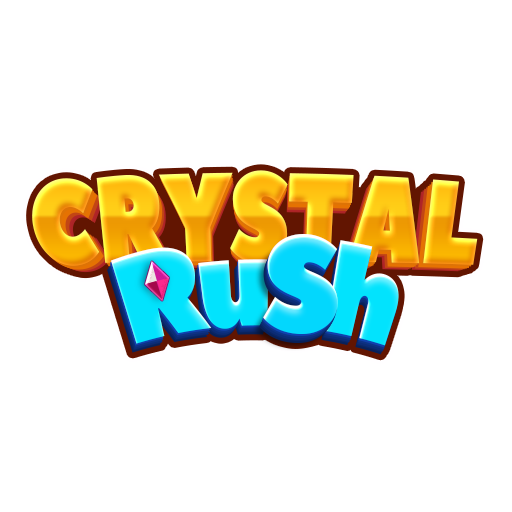
<style>
.page{position:relative;width:512px;height:512px;background:#ffffff}
.page>*{position:absolute;margin:0}
.t1{font:115px "PeaceSans";letter-spacing:-0.025em;scale:0.83 1}
.t2{font:113.9px "PeaceSans";letter-spacing:-0.025em;scale:0.83 1}
.t3{font:112.7px "PeaceSans";letter-spacing:-0.025em;scale:0.83 1}
.t4{font:111.6px "PeaceSans";letter-spacing:-0.025em;scale:0.83 1}
.t5{font:110.5px "PeaceSans";letter-spacing:-0.025em;scale:0.83 1}
.t6{font:109.4px "PeaceSans";letter-spacing:-0.025em;scale:0.83 1}
.t7{font:108.3px "PeaceSans";letter-spacing:-0.025em;scale:0.83 1}
.t8{font:107.2px "PeaceSans";letter-spacing:-0.025em;scale:0.83 1}
.t9{font:137.5px "PeaceSans";color:#03d7fd;scale:0.91 1}
.t10{font:124.6px "PeaceSans";letter-spacing:-0.075em;color:#02e3fd;scale:0.77 1}
</style>
<div class="page">
<p class="t1" style="left:32px;top:170px;width:446px;height:96px">CRYSTAL</p>
<p class="t2" style="left:34px;top:172px;width:441px;height:96px">CRYSTAL</p>
<p class="t3" style="left:36px;top:175px;width:437px;height:94px">CRYSTAL</p>
<p class="t4" style="left:38px;top:177px;width:433px;height:93px">CRYSTAL</p>
<p class="t5" style="left:40px;top:178px;width:429px;height:93px">CRYSTAL</p>
<p class="t6" style="left:43px;top:180px;width:424px;height:91px">CRYSTAL</p>
<p class="t7" style="left:45px;top:181px;width:420px;height:91px">CRYSTAL</p>
<p class="t8" style="left:47px;top:183px;width:416px;height:90px">CRYSTAL</p>
<p class="t9" style="left:263px;top:233px;width:75px;height:101px">S</p>
<p class="t10" style="left:111px;top:240px;width:288px;height:106px">Ru    h</p>
</div>
